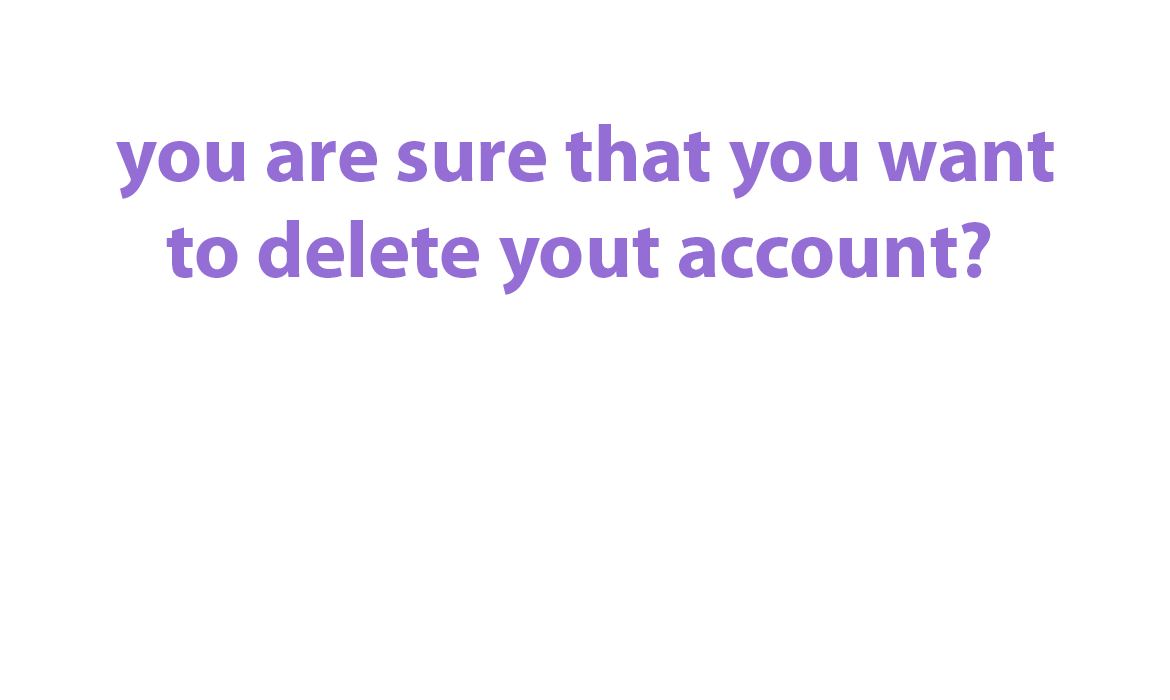
<style>
.page{position:relative;width:1170px;height:700px;background:#ffffff}
.page>*{position:absolute;margin:0}
.t1{font:80px "MyriadPro-Bold";color:#956ed5}
</style>
<div class="page">
<p class="t1" style="left:116px;top:124px;width:938px;height:171px;text-align:center">you are sure that you want<br>to delete yout account?</p>
</div>
